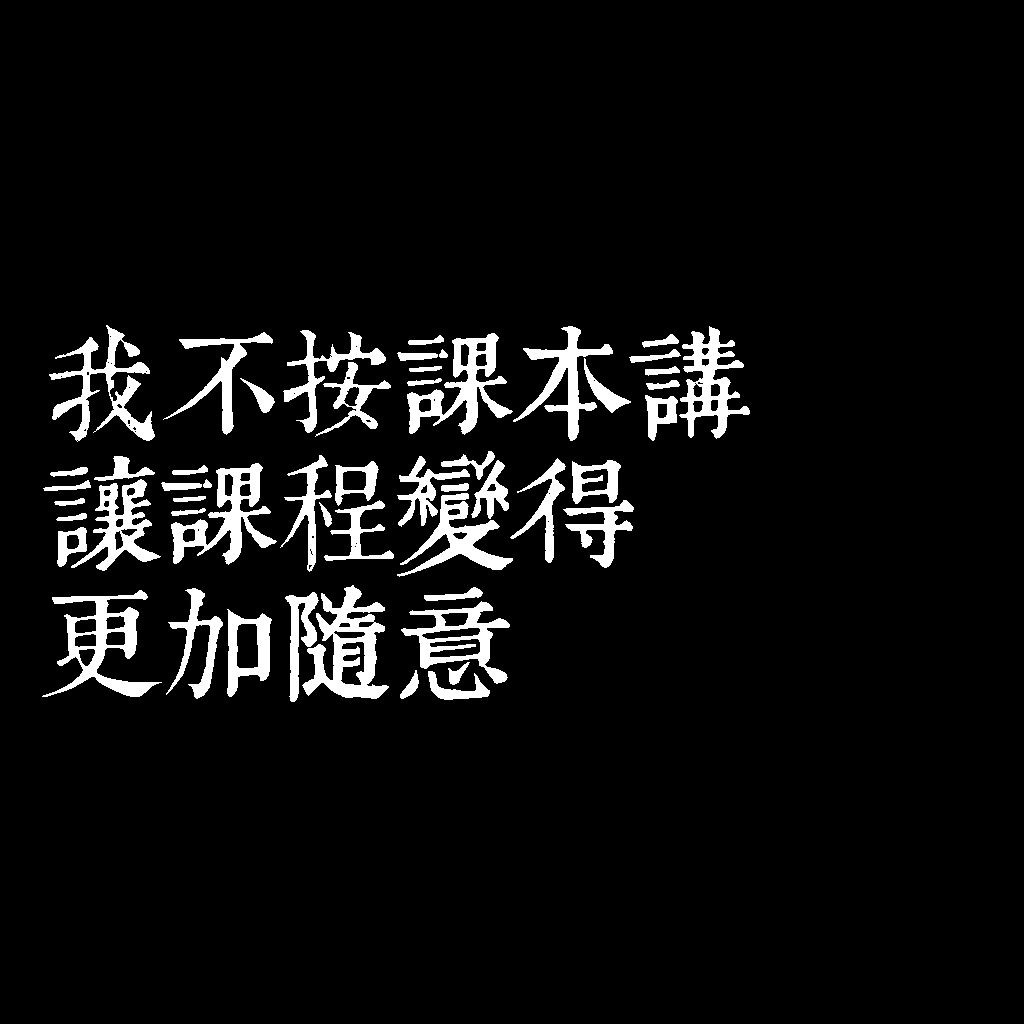
<style>
.page{position:relative;width:1024px;height:1024px;background:#000000}
.page>*{position:absolute;margin:0}
.t1{font:120px/130px "TpldKhangXiDictTrial";letter-spacing:-0.02em;color:#ffffff}
</style>
<div class="page">
<p class="t1" style="left:42px;top:325px;width:708px;height:377px">我不按課本講<br>讓課程變得<br>更加隨意</p>
</div>
